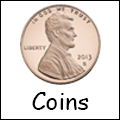
<style>
.page{position:relative;width:120px;height:120px;background:#ffffff}
.page>*{position:absolute;margin:0}
.t1{font:24px "ComicSansMS";color:#000000}
</style>
<div class="page">
<p class="t1" style="left:32px;top:92px;width:57px;height:18px">Coins</p>
</div>
